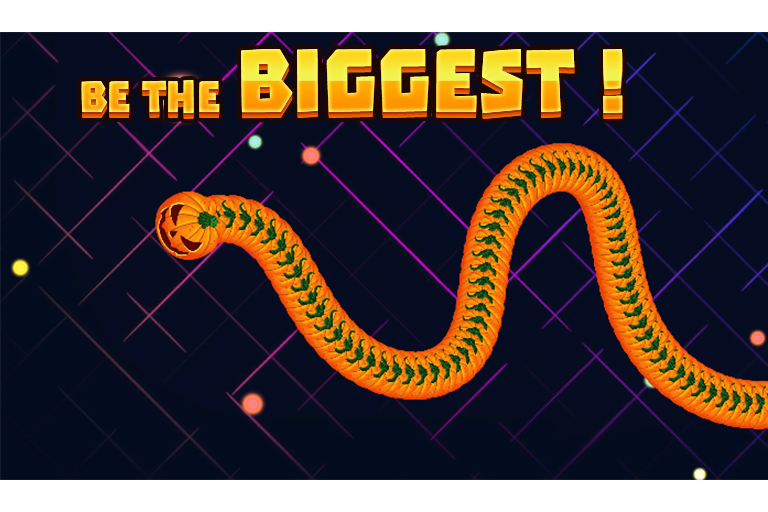
<style>
.page{position:relative;width:768px;height:512px;background:#050c21}
.page>*{position:absolute;margin:0}
.t1{font:100px "Troika"}
.t2{font:50px "Troika"}
</style>
<div class="page">
<p class="t1" style="left:81px;top:49px;width:542px;height:64px"><span class="t2">Be the </span>biggest !</p>
</div>
